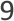
<style>
.page{position:relative;width:14px;height:21px;background:#ffffff}
.page>*{position:absolute;margin:0}
.t1{font:30px "Calibri";color:#3c3c3c}
</style>
<div class="page">
<p class="t1" style="left:0px;top:0px;width:14px;height:21px">9</p>
</div>
